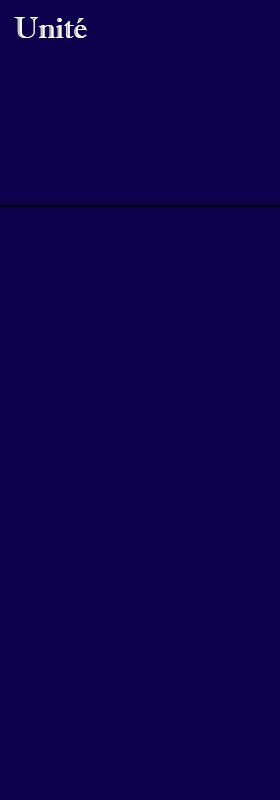
<style>
.page{position:relative;width:280px;height:800px;background:#0d004c}
.page>*{position:absolute;margin:0}
.t1{font:30px "ImprintMT-Shadow";color:#ffffff}
</style>
<div class="page">
<p class="t1" style="left:14px;top:17px;width:73px;height:21px">Unité</p>
</div>
